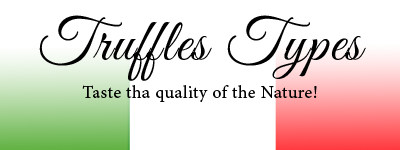
<style>
.page{position:relative;width:400px;height:150px;background:#ffffff}
.page>*{position:absolute;margin:0}
.t1{font:60px "GreatVibes-Regular";letter-spacing:0.025em;color:#000000}
.t2{font:18px "MinionPro-Regular";letter-spacing:0.025em;color:#000000}
</style>
<div class="page">
<p class="t1" style="left:39px;top:15px;width:327px;height:66px">Truffles Types</p>
<p class="t2" style="left:82px;top:85px;width:235px;height:17px">Taste tha quality of the Nature!</p>
</div>
